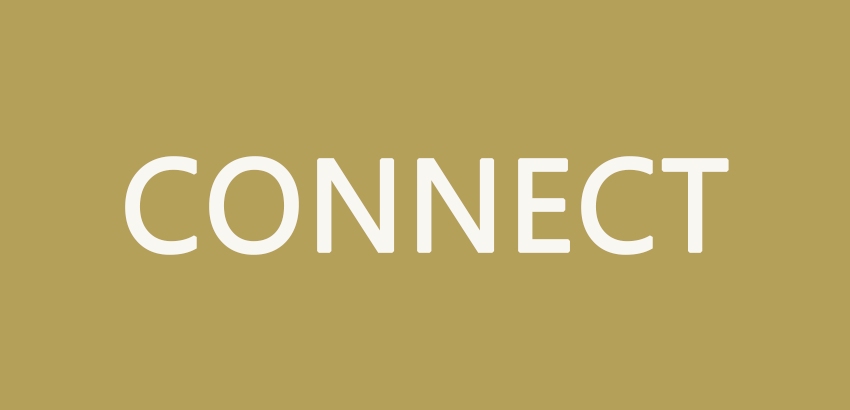
<style>
.page{position:relative;width:850px;height:410px;background:#b5a05a}
.page>*{position:absolute;margin:0}
.t1{font:130px "SegoeUI";color:#ffffff;font-weight:bold}
</style>
<div class="page">
<p class="t1" style="left:125px;top:156px;width:604px;height:99px;opacity:0.9">CONNECT</p>
</div>
